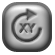
<style>
.page{position:relative;width:55px;height:55px;background:#ffffff}
.page>*{position:absolute;margin:0}
.t1{font:12px "ArialMT";color:#575757}
</style>
<div class="page">
<p class="t1" style="left:20px;top:24px;width:16px;height:9px">XY</p>
</div>
